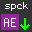
<style>
.page{position:relative;width:32px;height:32px;background:#333333}
.page>*{position:absolute;margin:0}
.t1{font:9px "Monaco";letter-spacing:0.06em;color:#ffffff}
.t2{font:11.9px "Monaco";letter-spacing:0.06em;color:#ffffff}
.t3{font:23.7px "Monaco";letter-spacing:0.06em;color:#06ff00}
</style>
<div class="page">
<p class="t1" style="left:5px;top:2px;width:23px;height:9px">spck</p>
<p class="t2" style="left:4px;top:18px;width:12px;height:9px">AE</p>
<p class="t3" style="left:20px;top:18px;width:10px;height:12px;rotate:90deg">→</p>
</div>
